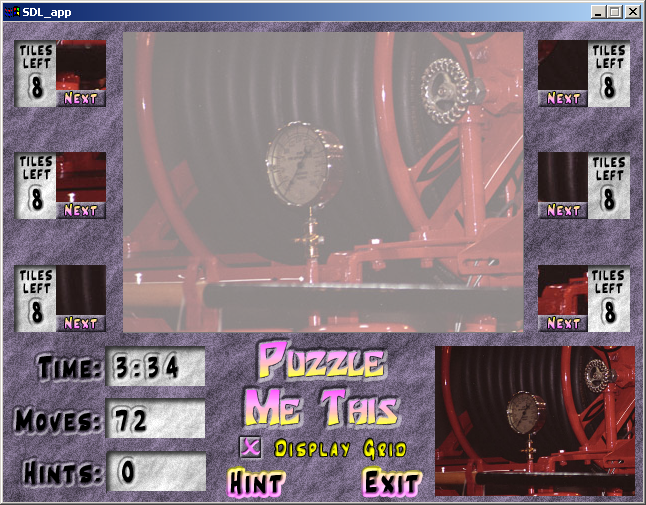
<style>
.page{position:relative;width:646px;height:505px}
.page>*{position:absolute;margin:0}
.t1{font:30px "Inkpen2Script";letter-spacing:0.1em;color:#000000;font-weight:bold}
.t2{font:16px "Inkpen2Script";letter-spacing:0.1em;font-weight:bold}
.t3{font:40px "Houters-Normal";font-variant:small-caps;font-weight:bold}
.t4{font:30px "Inkpen2Script";letter-spacing:0.25em;color:#000000;font-weight:bold}
.t5{font:24px "Inkpen2Script";letter-spacing:0.1em;font-weight:bold}
</style>
<div class="page">
<p class="t1" style="left:32px;top:76px;width:10px;height:22px">8</p>
<p class="t1" style="left:604px;top:76px;width:10px;height:22px">8</p>
<p class="t2" style="left:65px;top:92px;width:32px;height:12px">Next</p>
<p class="t2" style="left:548px;top:92px;width:32px;height:12px">Next</p>
<p class="t1" style="left:32px;top:188px;width:10px;height:22px">8</p>
<p class="t1" style="left:604px;top:188px;width:10px;height:22px">8</p>
<p class="t2" style="left:65px;top:204px;width:32px;height:12px">Next</p>
<p class="t2" style="left:548px;top:204px;width:32px;height:12px">Next</p>
<p class="t1" style="left:32px;top:301px;width:10px;height:22px">8</p>
<p class="t1" style="left:605px;top:301px;width:10px;height:22px">8</p>
<p class="t2" style="left:65px;top:317px;width:32px;height:12px">Next</p>
<p class="t2" style="left:548px;top:317px;width:32px;height:12px">Next</p>
<p class="t3" style="left:260px;top:341px;width:124px;height:37px">Puzzle</p>
<p class="t1" style="left:38px;top:356px;width:62px;height:22px">Time:</p>
<p class="t4" style="left:116px;top:356px;width:62px;height:22px">3:34</p>
<p class="t3" style="left:246px;top:389px;width:152px;height:37px">Me This</p>
<p class="t1" style="left:16px;top:409px;width:83px;height:22px">Moves:</p>
<p class="t4" style="left:116px;top:409px;width:30px;height:22px">72</p>
<p class="t5" style="left:275px;top:438px;width:131px;height:22px">Display Grid</p>
<p class="t1" style="left:24px;top:461px;width:76px;height:23px">Hints:</p>
<p class="t4" style="left:122px;top:460px;width:12px;height:23px">0</p>
<p class="t1" style="left:230px;top:470px;width:188px;height:24px">Hint      Exit</p>
</div>
